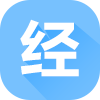
<style>
.page{position:relative;width:100px;height:100px;background:#77c1fe}
.page>*{position:absolute;margin:0}
.t1{font:60px "MicrosoftYaHei-Bold";color:#ffffff}
</style>
<div class="page">
<p class="t1" style="left:20px;top:19px;width:60px;height:58px">经</p>
</div>
